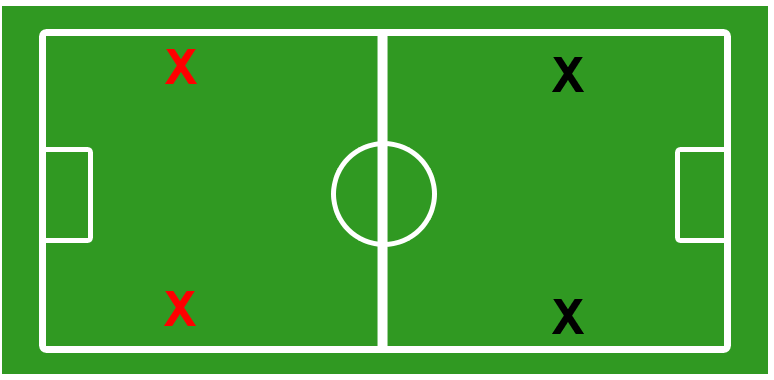
<style>
.page{position:relative;width:774px;height:380px;background:#309922}
.page>*{position:absolute;margin:0}
.t1{font:48px "Arial-BoldMT";color:#ff0000}
.t2{font:48px "Arial-BoldMT";color:#000000}
.t3{font:48px "Arial-BoldMT";color:#fe0000}
.t4{font:48px "Arial-BoldMT";color:#010101}
</style>
<div class="page">
<p class="t1" style="left:165px;top:49px;width:32px;height:35px">X</p>
<p class="t2" style="left:552px;top:57px;width:32px;height:35px">X</p>
<p class="t3" style="left:164px;top:291px;width:32px;height:35px">X</p>
<p class="t4" style="left:552px;top:299px;width:32px;height:35px">X</p>
</div>
